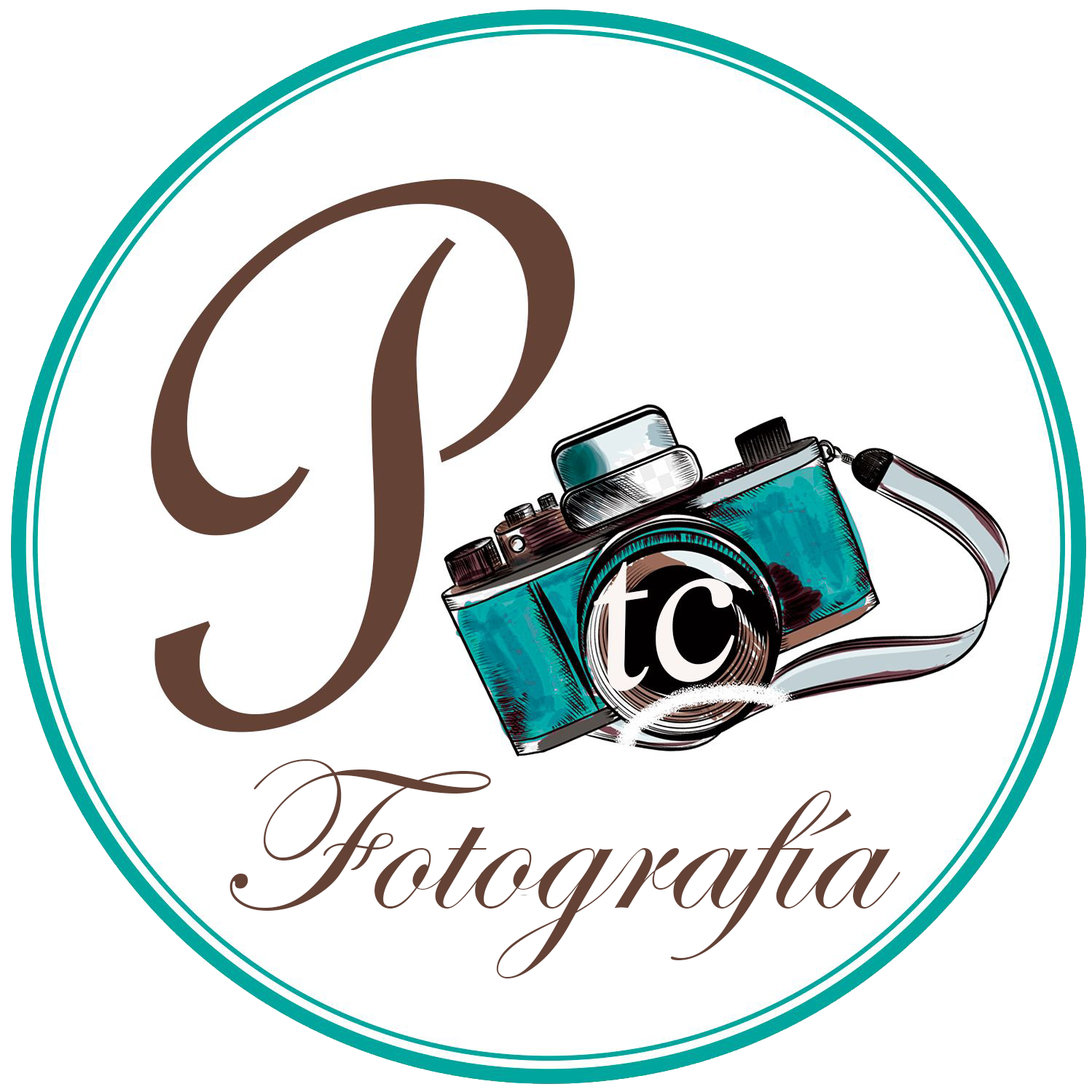
<style>
.page{position:relative;width:1092px;height:1092px;background:#ffffff}
.page>*{position:absolute;margin:0}
.t1{font:220.4px "EdwardianScriptITC";color:#644236}
</style>
<div class="page">
<p class="t1" style="left:229px;top:760px;width:671px;height:219px">Fotografía</p>
</div>
